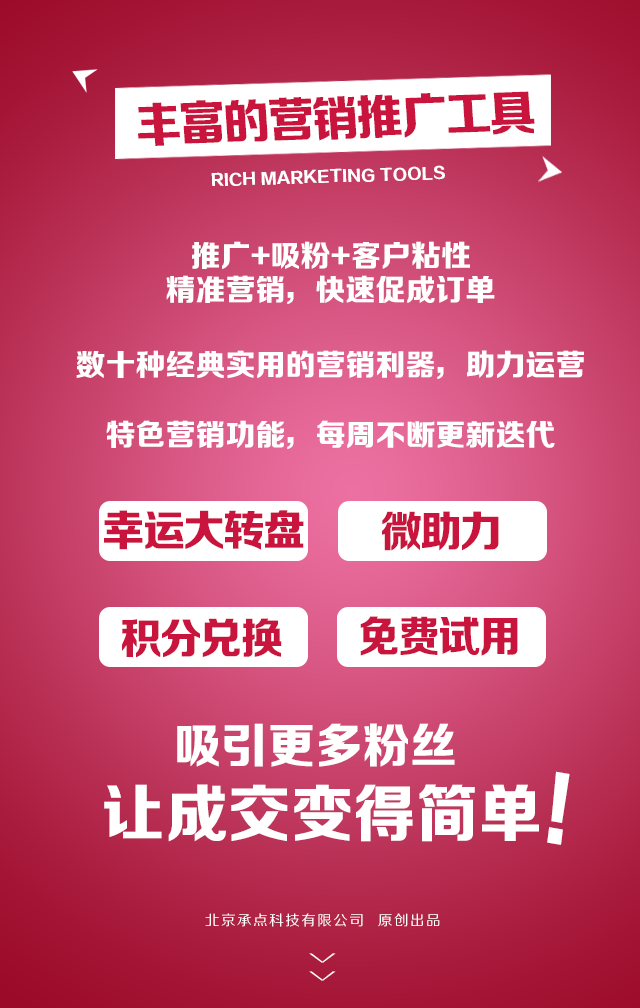
<style>
.page{position:relative;width:640px;height:1008px}
.page>*{position:absolute;margin:0}
.t1{font:48px "FZZDHJW--GB1-0";letter-spacing:-0.05em;color:#c9143d;text-transform:uppercase}
.t2{font:15.6px "FZZDHJW--GB1-0";letter-spacing:0.005em;color:#ffffff;text-transform:uppercase}
.t3{font:30px/33.3px "FZZDHJW--GB1-0";color:#ffffff;text-transform:uppercase}
.t4{font:30px "FZZDHJW--GB1-0";color:#ffffff;text-transform:uppercase}
.t5{font:42.6px "FZZDHJW--GB1-0";letter-spacing:-0.05em;color:#c9143d;text-transform:uppercase}
.t6{font:47.7px "FZZDHJW--GB1-0";letter-spacing:0.005em;color:#ffffff;text-transform:uppercase}
.t7{font:84.6px "FZZDHJW--GB1-0";letter-spacing:0.005em;color:#ffffff;text-transform:uppercase;scale:0.86 1}
.t8{font:62.7px "FZZDHJW--GB1-0";letter-spacing:0.005em;color:#ffffff;text-transform:uppercase}
.t9{font:14.2px "FZZHJW--GB1-0";letter-spacing:0.1em;color:#ffffff;text-transform:uppercase}
.t10{font:36.8px "FZZXHJW--GB1-0";letter-spacing:0.5em;color:#ffffff;text-transform:uppercase;scale:0.44 1}
</style>
<div class="page">
<p class="t1" style="left:138px;top:91px;width:397px;height:55px;rotate:-2deg">丰富的营销推广工具</p>
<p class="t2" style="left:211px;top:165px;width:234px;height:21px;rotate:-2deg">Rich marketing tools</p>
<p class="t3" style="left:166px;top:241px;width:329px;height:63px;text-align:center">推广+吸粉+客户粘性<br>精准营销，快速促成订单</p>
<p class="t4" style="left:76px;top:350px;width:508px;height:29px">数十种经典实用的营销利器，助力运营</p>
<p class="t4" style="left:106px;top:420px;width:449px;height:29px">特色营销功能，每周不断更新迭代</p>
<p class="t5" style="left:104px;top:510px;width:200px;height:40px">幸运大转盘</p>
<p class="t5" style="left:382px;top:511px;width:117px;height:40px">微助力</p>
<p class="t5" style="left:360px;top:616px;width:158px;height:40px">免费试用</p>
<p class="t5" style="left:122px;top:618px;width:160px;height:40px">积分兑换</p>
<p class="t6" style="left:177px;top:723px;width:278px;height:44px">吸引更多粉丝</p>
<p class="t7" style="left:547px;top:771px;width:23px;height:74px;rotate:10deg">!</p>
<p class="t8" style="left:104px;top:784px;width:435px;height:58px">让成交变得简单</p>
<p class="t9" style="left:205px;top:913px;width:235px;height:14px">北京承点科技有限公司  原创出品</p>
<p class="t10" style="left:309px;top:953px;width:27px;height:28px;rotate:90deg">&gt;&gt;</p>
</div>
